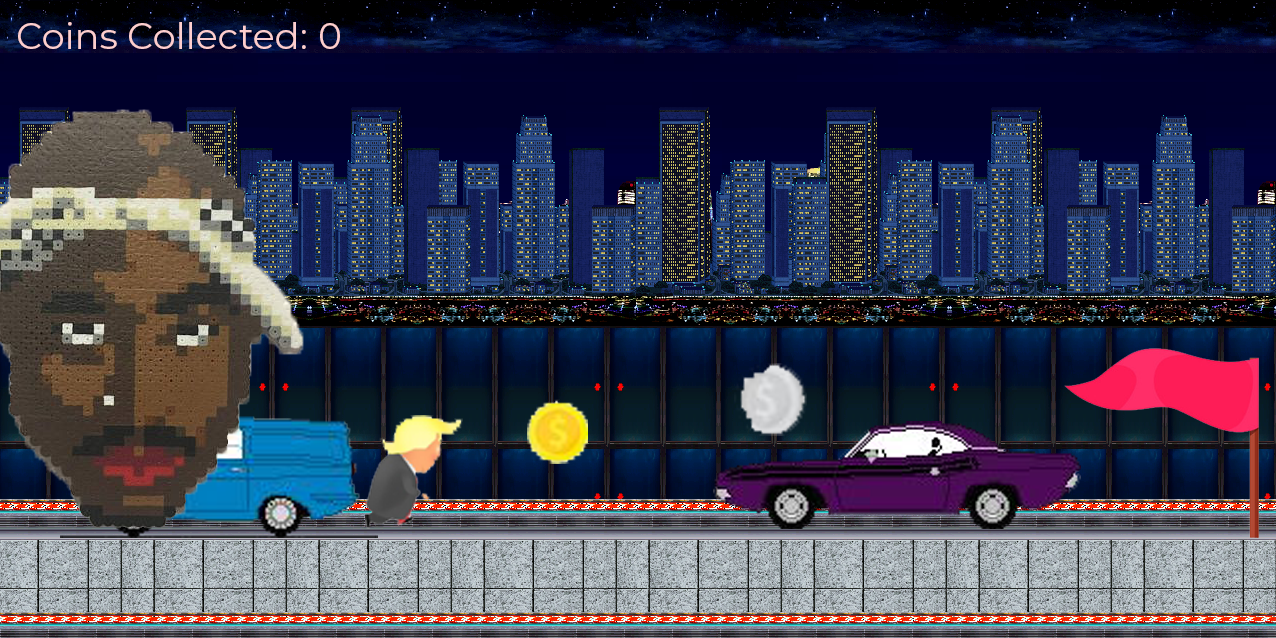
<style>
.page{position:relative;width:1276px;height:638px}
.page>*{position:absolute;margin:0}
.t1{font:36px "Montserrat-Regular";letter-spacing:0.01em;color:#fdcece}
</style>
<div class="page">
<p class="t1" style="left:18px;top:22px;width:322px;height:27px">Coins Collected: 0</p>
</div>
